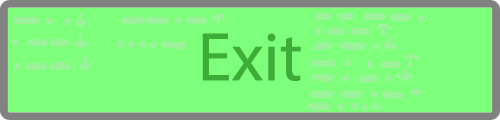
<style>
.page{position:relative;width:500px;height:120px;background:#7eff7b}
.page>*{position:absolute;margin:0}
.t1{font:69px "MyriadPro-Regular";color:#3dad37}
</style>
<div class="page">
<p class="t1" style="left:202px;top:33px;width:99px;height:48px">Exit</p>
</div>
